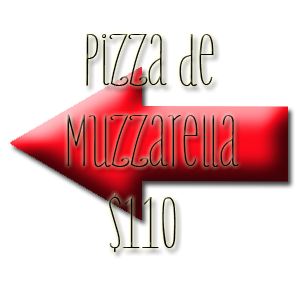
<style>
.page{position:relative;width:300px;height:300px;background:#ffffff}
.page>*{position:absolute;margin:0}
.t1{font:68px "OnlyYouProLight";color:#060001}
.t2{font:68px "OnlyYouProLight";color:#fd0a1b}
</style>
<div class="page">
<p class="t1" style="left:67px;top:34px;width:172px;height:218px"><span class="t2"> </span>  Pizza de <br>      Muzzarella<br>          $110</p>
</div>
